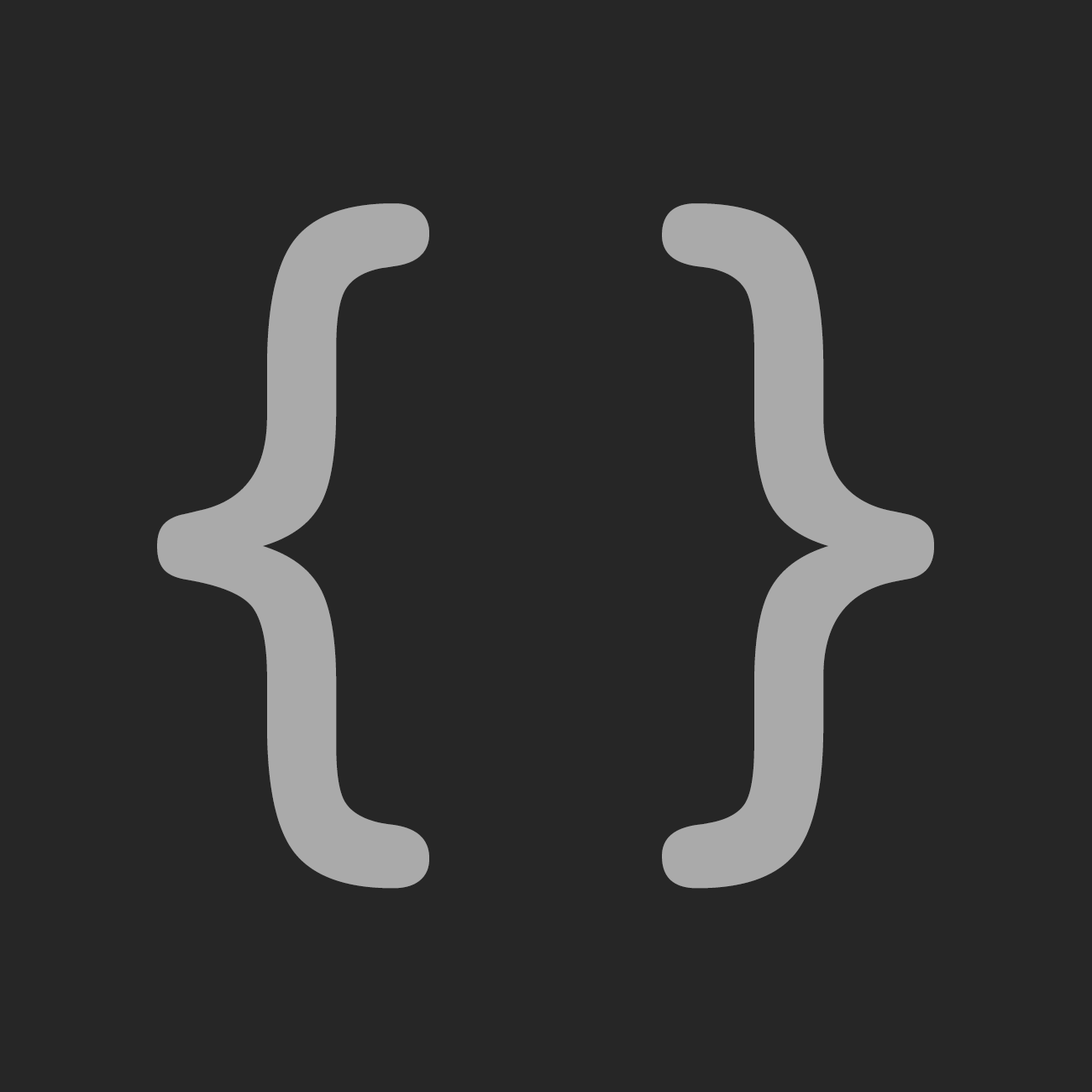
<style>
.page{position:relative;width:1092px;height:1092px;background:#262626}
.page>*{position:absolute;margin:0}
.t1{font:840px "Courier";color:#aaaaaa}
</style>
<div class="page">
<p class="t1" style="left:157px;top:203px;width:777px;height:686px">{}</p>
</div>
